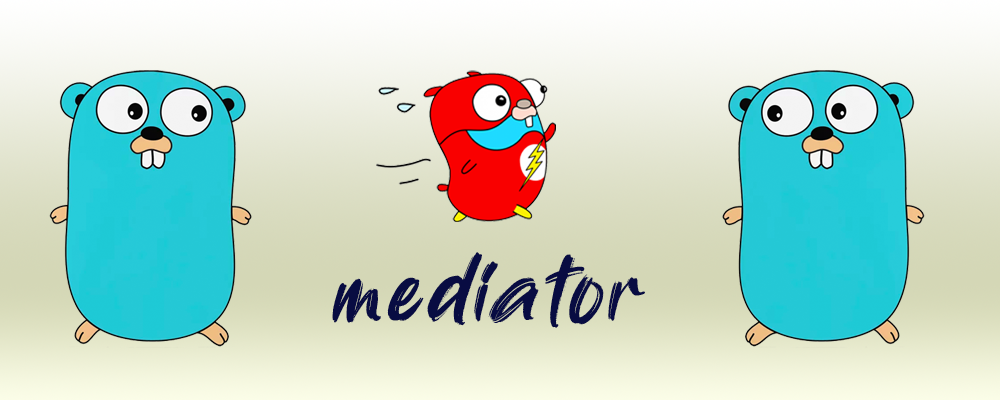
<style>
.page{position:relative;width:1000px;height:400px}
.page>*{position:absolute;margin:0}
.t1{font:96px "Golang";letter-spacing:0.045em;color:#080c42;font-style:italic}
</style>
<div class="page">
<p class="t1" style="left:332px;top:252px;width:313px;height:76px">mediator</p>
</div>
